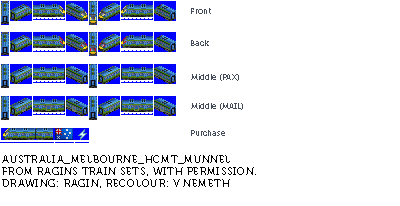
<style>
.page{position:relative;width:400px;height:206px;background:#ffffff}
.page>*{position:absolute;margin:0}
.t1{font:8px "Museo700-Regular";color:#444c5c}
.t2{font:10px "Museo700-Regular";letter-spacing:0.075em;color:#000000;text-transform:uppercase}
</style>
<div class="page">
<p class="t1" style="left:191px;top:8px;width:20px;height:6px">Front</p>
<p class="t1" style="left:191px;top:40px;width:18px;height:6px">Back</p>
<p class="t1" style="left:191px;top:74px;width:48px;height:7px">Middle (PAX)</p>
<p class="t1" style="left:191px;top:103px;width:52px;height:7px">Middle (MAIL)</p>
<p class="t1" style="left:191px;top:130px;width:34px;height:6px">Purchase</p>
<p class="t2" style="left:2px;top:155px;width:254px;height:33px">Australia_Melbourne_HCMT_Munnel<br>From Ragins Train Sets, with permission.<br>Drawing: Ragin, recolour: V Nemeth</p>
</div>
